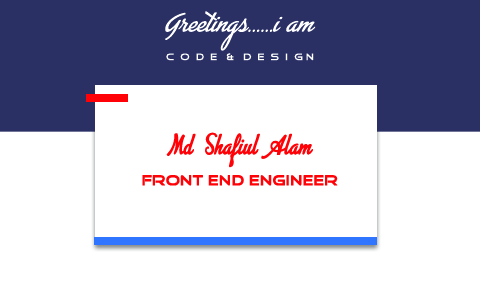
<style>
.page{position:relative;width:480px;height:282px;background:#ffffff}
.page>*{position:absolute;margin:0}
.t1{font:24.8px "AdvertisingScript";color:#ffffff;font-style:italic}
.t2{font:9.7px "GoodTimes";color:#ffffff}
.t3{font:23.8px "AdvertisingScript";color:#fe0207;text-transform:uppercase;font-weight:bold;scale:0.82 1}
.t4{font:14.4px "GoodTimes";color:#fe0207;text-transform:uppercase;font-weight:bold}
</style>
<div class="page">
<p class="t1" style="left:165px;top:11px;width:151px;height:40px">Greetings......i am</p>
<p class="t2" style="left:166px;top:53px;width:148px;height:8px">C  O  D  E   &amp;   D  E  S  I  G N</p>
<p class="t3" style="left:166px;top:132px;width:147px;height:36px">MD  SHAFIUL  ALAM</p>
<p class="t4" style="left:142px;top:175px;width:196px;height:11px">FRONT END ENgineer</p>
</div>
